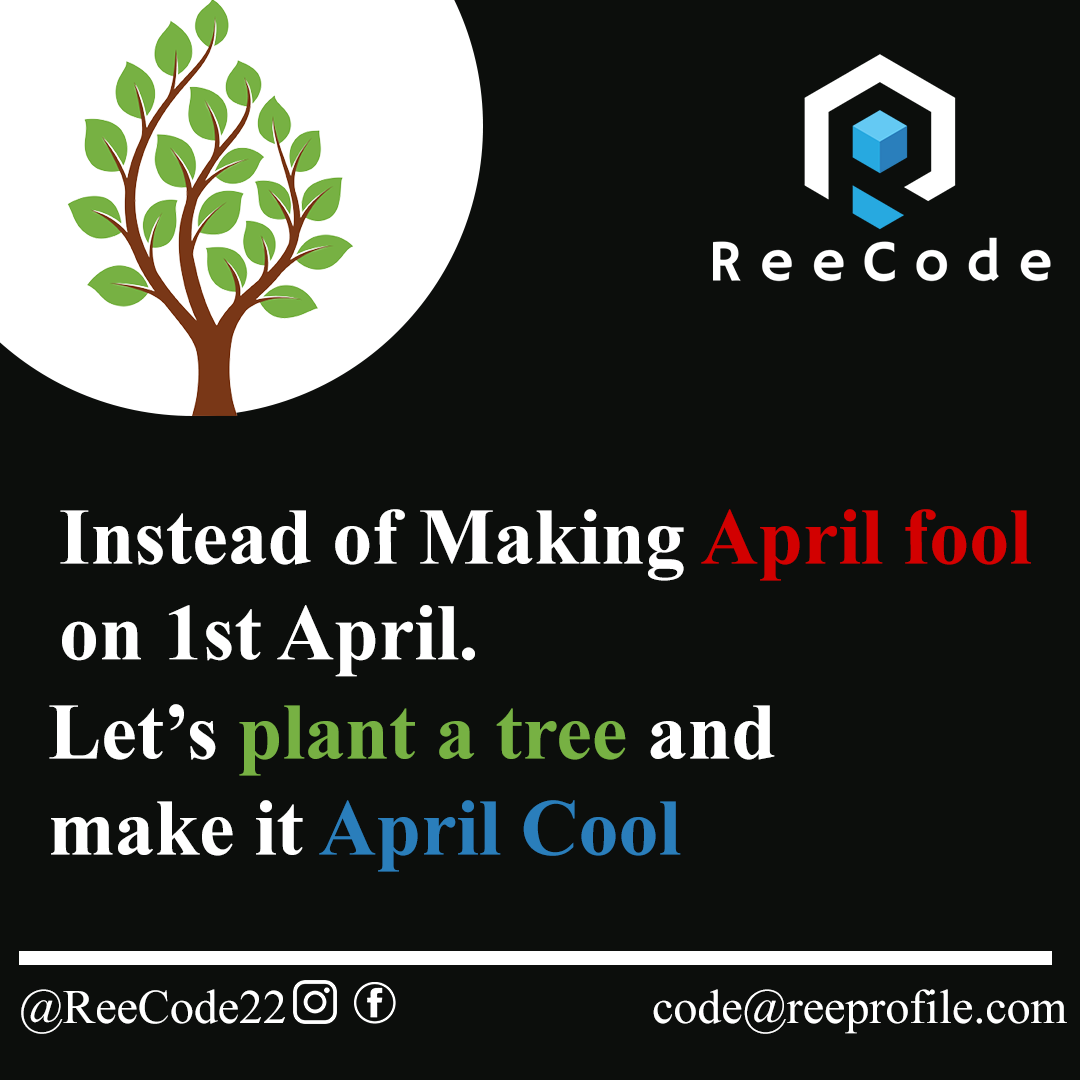
<style>
.page{position:relative;width:1080px;height:1080px;background:#0c0e0c}
.page>*{position:absolute;margin:0}
.t1{font:79.9px "TimesNewRomanPS-BoldMT";color:#ffffff}
.t2{font:79.9px "TimesNewRomanPS-BoldMT";color:#d20000}
.t3{font:79.9px "TimesNewRomanPS-BoldMT";color:#77b143}
.t4{font:79.9px "TimesNewRomanPS-BoldMT";color:#2a7ebb}
.t5{font:48px "TimesNewRomanPSMT";color:#ffffff}
</style>
<div class="page">
<p class="t1" style="left:60px;top:509px;width:971px;height:168px">Instead of Making <span class="t2">April fool<br></span>on 1st April.</p>
<p class="t3" style="left:49px;top:704px;width:726px;height:168px"><span class="t1">Let’s </span>plant a tree<span class="t1"> and<br>make it </span><span class="t4">April Cool</span></p>
<p class="t5" style="left:21px;top:989px;width:264px;height:45px">@ReeCode22</p>
<p class="t5" style="left:653px;top:989px;width:414px;height:45px">code@reeprofile.com</p>
</div>
